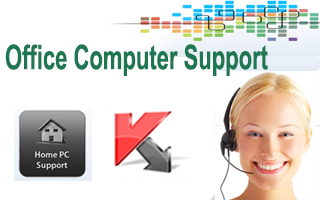
<style>
.page{position:relative;width:320px;height:200px;background:#ffffff}
.page>*{position:absolute;margin:0}
.t1{font:34px "Arial-BoldMT";color:#1f7751;scale:0.65 1}
</style>
<div class="page">
<p class="t1" style="left:5px;top:44px;width:263px;height:32px">Office Computer Support</p>
</div>
